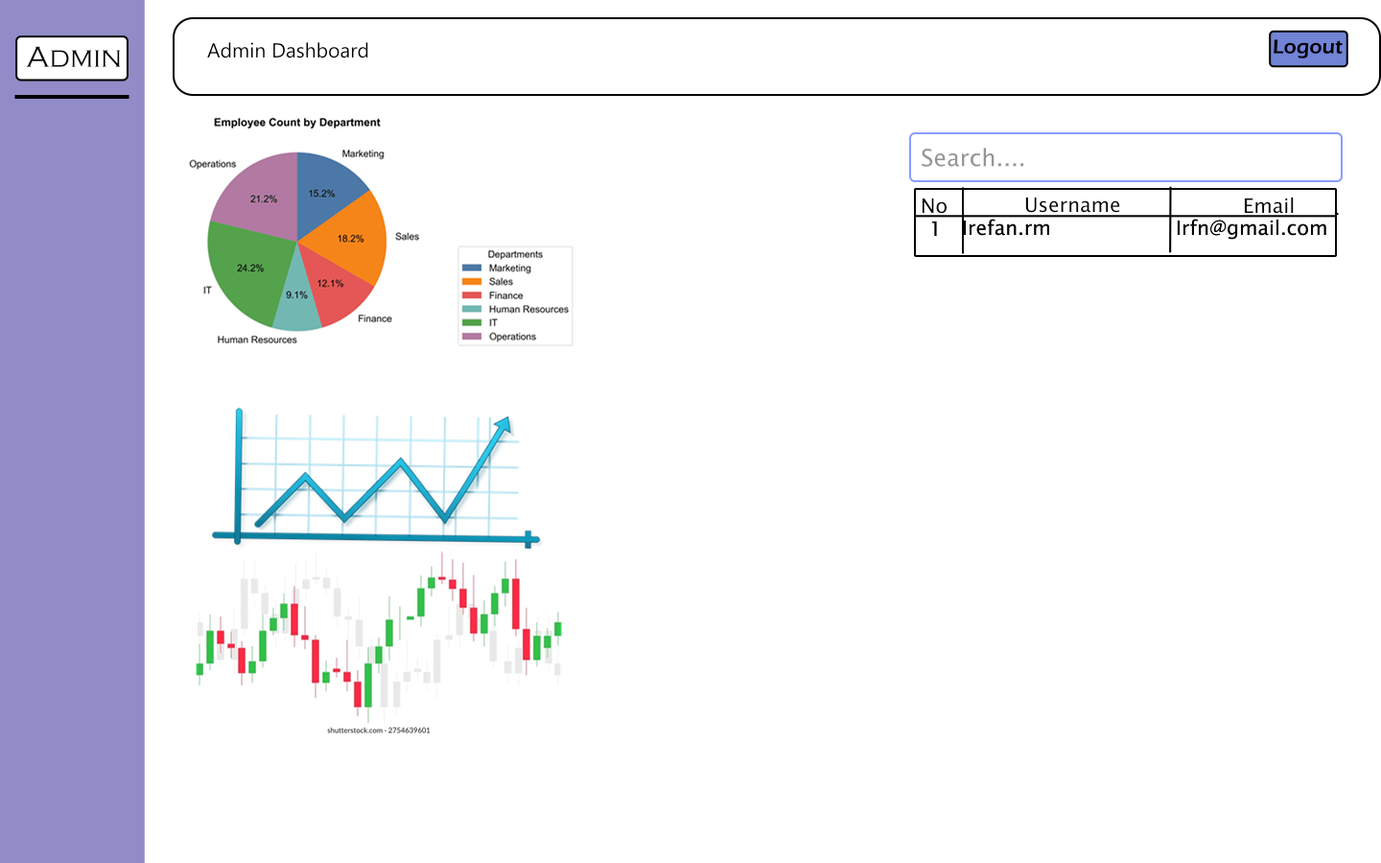
<style>
.page{position:relative;width:1381px;height:863px;background:#ffffff}
.page>*{position:absolute;margin:0}
.t1{font:20.6px "ErasITC-Demi";color:#000000}
.t2{font:30.1px "CopperplateGothic-Light";color:#000000}
.t3{font:20.3px "SegoeUI";color:#000000}
.t4{font:23.5px "LucidaSans";color:#999494}
.t5{font:20px "LucidaSans";color:#000000}
</style>
<div class="page">
<p class="t1" style="left:1274px;top:39px;width:69px;height:20px">Logout</p>
<p class="t2" style="left:26px;top:46px;width:95px;height:21px">Admin</p>
<p class="t3" style="left:207px;top:42px;width:161px;height:17px">Admin Dashboard</p>
<p class="t4" style="left:921px;top:148px;width:104px;height:20px">Search....</p>
<p class="t5" style="left:922px;top:198px;width:26px;height:16px">No</p>
<p class="t5" style="left:1025px;top:197px;width:95px;height:16px">Username</p>
<p class="t5" style="left:1244px;top:197px;width:50px;height:17px">Email</p>
<p class="t5" style="left:932px;top:221px;width:5px;height:15px">1</p>
<p class="t5" style="left:932px;top:221px;width:5px;height:15px">1</p>
<p class="t5" style="left:963px;top:219px;width:86px;height:17px">Irefan.rm</p>
<p class="t5" style="left:963px;top:219px;width:86px;height:17px">Irefan.rm</p>
<p class="t5" style="left:1177px;top:219px;width:150px;height:21px">Irfn@gmail.com</p>
<p class="t5" style="left:1177px;top:219px;width:150px;height:21px">Irfn@gmail.com</p>
</div>
